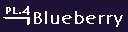
<style>
.page{position:relative;width:128px;height:32px;background:#1d1135}
.page>*{position:absolute;margin:0}
.t1{font:12px "BonvenoCF-Light";letter-spacing:0.005em;color:#ffffff;font-weight:bold}
.t2{font:9px "BonvenoCF-Light";letter-spacing:0.005em;color:#ffffff;font-weight:bold}
.t3{font:16px "BonvenoCF-Light";letter-spacing:0.005em;color:#ffffff;font-weight:bold}
</style>
<div class="page">
<p class="t1" style="left:22px;top:6px;width:8px;height:9px">4</p>
<p class="t2" style="left:6px;top:7px;width:15px;height:7px">PL.</p>
<p class="t3" style="left:34px;top:11px;width:89px;height:16px">Blueberry</p>
</div>
